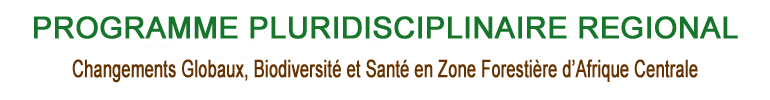
<style>
.page{position:relative;width:770px;height:100px;background:#ffffff}
.page>*{position:absolute;margin:0}
.t1{font:24px "ArialMT";color:#663300;font-weight:bold;scale:0.67 1}
</style>
<div class="page">
<p class="t1" style="left:72px;top:59px;width:626px;height:24px">Changements Globaux, Biodiversité et Santé en Zone Forestière d’Afrique Centrale</p>
</div>
